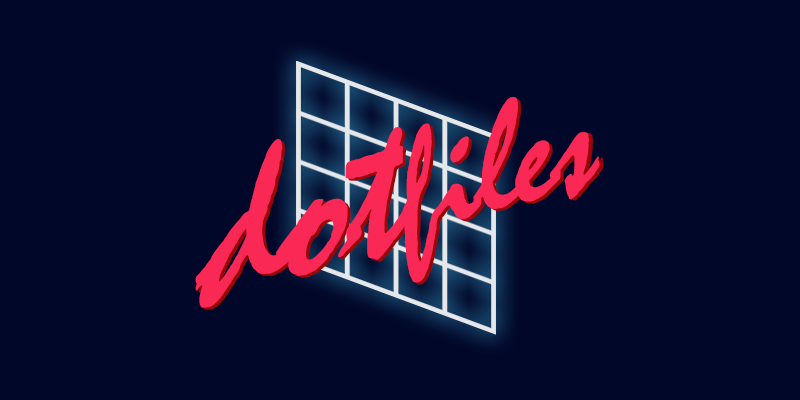
<style>
.page{position:relative;width:800px;height:400px;background:#010729}
.page>*{position:absolute;margin:0}
.t1{font:149.8px "MistralStd";letter-spacing:-0.05em;color:#fa2855;scale:1.03 1}
.t2{font:199.7px "MistralStd";letter-spacing:-0.05em;color:#fa2855;scale:1.03 1}
</style>
<div class="page">
<p class="t1" style="left:195px;top:97px;width:405px;height:211px;rotate:-18deg"><span class="t2">dot</span>files</p>
<p class="t1" style="left:198px;top:99px;width:406px;height:211px;rotate:-18deg"><span class="t2">dot</span>files</p>
</div>
